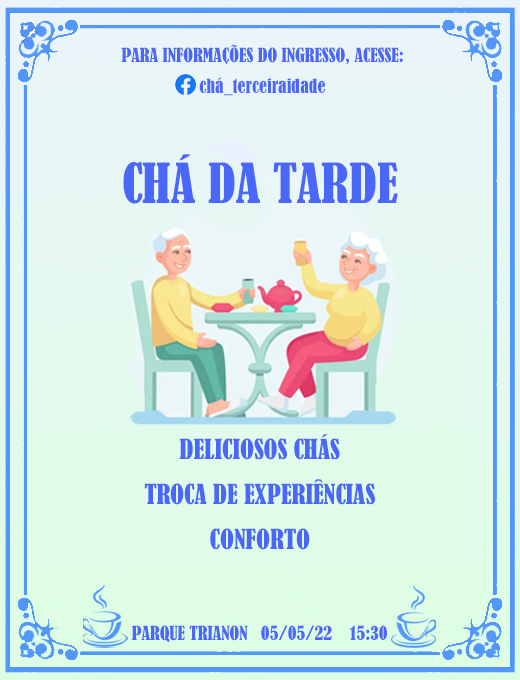
<style>
.page{position:relative;width:520px;height:680px}
.page>*{position:absolute;margin:0}
.t1{font:18px "BernardMT-Condensed";color:#4b67fa}
.t2{font:51.3px "BernardMT-Condensed";color:#4b67fa}
.t3{font:25.7px "BernardMT-Condensed";color:#4b67fa}
</style>
<div class="page">
<p class="t1" style="left:121px;top:44px;width:282px;height:52px;text-align:center">PARA INFORMAÇÕES DO INGRESSO, ACESSE:<br>chá_terceiraidade</p>
<p class="t2" style="left:123px;top:154px;width:275px;height:50px">CHÁ DA TARDE</p>
<p class="t3" style="left:144px;top:434px;width:231px;height:116px;text-align:center">DELICIOSOS CHÁS<br>TROCA DE EXPERIÊNCIAS<br>CONFORTO</p>
<p class="t1" style="left:132px;top:625px;width:255px;height:17px">PARQUE TRIANON   05/05/22    15:30</p>
</div>
